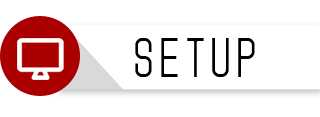
<style>
.page{position:relative;width:320px;height:117px;background:#ffffff}
.page>*{position:absolute;margin:0}
.t1{font:49.6px "078MKSDMediumCondensed";letter-spacing:0.14em;color:#000000}
</style>
<div class="page">
<p class="t1" style="left:135px;top:38px;width:120px;height:39px">SETUP</p>
</div>
